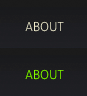
<style>
.page{position:relative;width:87px;height:96px}
.page>*{position:absolute;margin:0}
.t1{font:12.6px "Aller-Light";color:#ebe8d0}
.t2{font:12.6px "Aller-Light";color:#83f901}
</style>
<div class="page">
<p class="t1" style="left:25px;top:21px;width:39px;height:11px">ABOUT</p>
<p class="t2" style="left:25px;top:69px;width:39px;height:11px">ABOUT</p>
</div>
